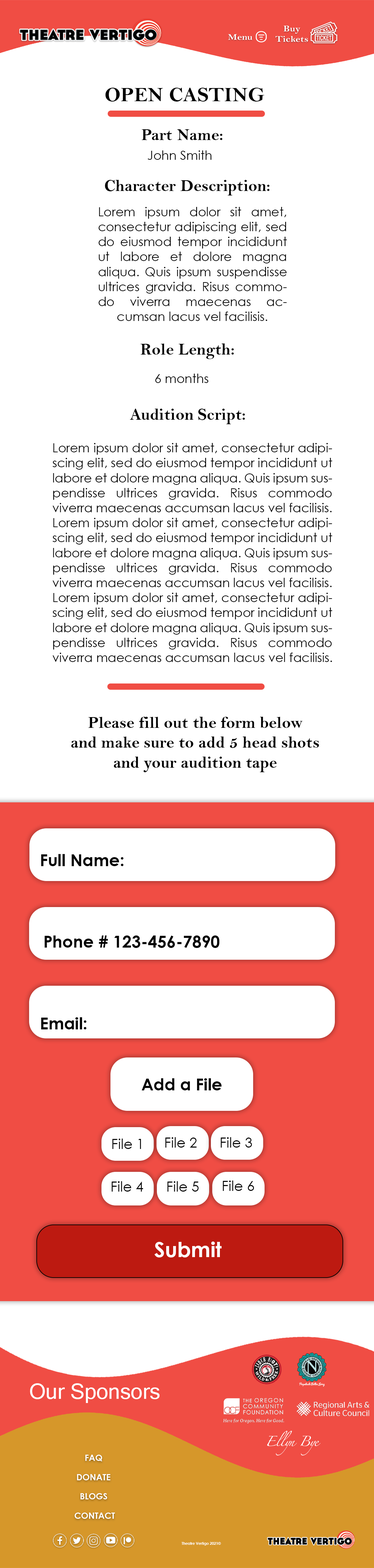
<style>
.page{position:relative;width:374px;height:1568px;background:#ffffff}
.page>*{position:absolute;margin:0}
.t1{font:20.8px "BellMTBold";color:#010101}
.t2{font:16.6px "BellMTBold";color:#010101}
.t3{font:12.5px "CenturyGothic";color:#010101}
.t4{font:12.5px "CenturyGothic";color:#000000}
.t5{font:16.6px "CenturyGothic-Bold";color:#040404}
.t6{font:16.6px "CenturyGothic-Bold";color:#010101}
.t7{font:14px "CenturyGothic";color:#040404}
.t8{font:20.8px "CenturyGothic-Bold";color:#ffffff}
.t9{font:21.4px "MicrosoftSansSerif";color:#ffffff}
.t10{font:8.6px "CenturyGothic-Bold";color:#ffffff}
.t11{font:3.7px "CenturyGothic-Bold";color:#ffffff}
</style>
<div class="page">
<p class="t1" style="left:105px;top:88px;width:160px;height:14px">OPEN CASTING</p>
<p class="t2" style="left:142px;top:129px;width:81px;height:11px">Part Name:</p>
<p class="t3" style="left:148px;top:150px;width:64px;height:10px">John Smith</p>
<p class="t2" style="left:105px;top:180px;width:165px;height:15px">Character Description:</p>
<p class="t3" style="left:98px;top:207px;width:189px;height:114px;text-align:justify">Lorem ipsum dolor sit amet, consectetur adipiscing elit, sed do eiusmod tempor incididunt ut labore et dolore magna aliqua. Quis ipsum suspendisse ultrices gravida. Risus commodo viverra maecenas accumsan lacus vel facilisis.</p>
<p class="t2" style="left:141px;top:343px;width:93px;height:16px">Role Length:</p>
<p class="t3" style="left:155px;top:374px;width:54px;height:9px">6 months</p>
<p class="t2" style="left:130px;top:409px;width:115px;height:15px">Audition Script:</p>
<p class="t4" style="left:52px;top:443px;width:281px;height:219px;text-align:justify">Lorem ipsum dolor sit amet, consectetur adipiscing elit, sed do eiusmod tempor incididunt ut labore et dolore magna aliqua. Quis ipsum suspendisse ultrices gravida. Risus commodo viverra maecenas accumsan lacus vel facilisis. Lorem ipsum dolor sit amet, consectetur adipiscing elit, sed do eiusmod tempor incididunt ut labore et dolore magna aliqua. Quis ipsum suspendisse ultrices gravida. Risus commodo viverra maecenas accumsan lacus vel facilisis. Lorem ipsum dolor sit amet, consectetur adipiscing elit, sed do eiusmod tempor incididunt ut labore et dolore magna aliqua. Quis ipsum suspendisse ultrices gravida. Risus commodo viverra maecenas accumsan lacus vel facilisis.</p>
<p class="t2" style="left:71px;top:717px;width:248px;height:55px;text-align:justify">Please fill out the form below <br>and make sure to add 5 head shots <br>and your audition tape</p>
<p class="t5" style="left:41px;top:854px;width:83px;height:12px">Full Name:</p>
<p class="t6" style="left:45px;top:935px;width:175px;height:13px">Phone # 123-456-7890</p>
<p class="t5" style="left:41px;top:1017px;width:46px;height:12px">Email:</p>
<p class="t5" style="left:142px;top:1078px;width:80px;height:12px">Add a File</p>
<p class="t7" style="left:112px;top:1139px;width:29px;height:10px">File 1</p>
<p class="t7" style="left:165px;top:1137px;width:32px;height:11px">File 2</p>
<p class="t7" style="left:221px;top:1137px;width:31px;height:11px">File 3</p>
<p class="t7" style="left:112px;top:1181px;width:31px;height:11px">File 4</p>
<p class="t7" style="left:167px;top:1181px;width:32px;height:11px">File 5</p>
<p class="t7" style="left:223px;top:1181px;width:31px;height:10px">File 6</p>
<p class="t8" style="left:155px;top:1242px;width:67px;height:15px">Submit</p>
<p class="t9" style="left:30px;top:1383px;width:130px;height:20px">Our Sponsors</p>
<p class="t10" style="left:85px;top:1455px;width:18px;height:6px">FAQ</p>
<p class="t10" style="left:77px;top:1474px;width:34px;height:6px">DONATE</p>
<p class="t10" style="left:80px;top:1493px;width:27px;height:6px">BLOGS</p>
<p class="t10" style="left:75px;top:1513px;width:40px;height:6px">CONTACT</p>
<p class="t11" style="left:182px;top:1542px;width:39px;height:3px">Theatre Vertigo 2021©</p>
</div>
